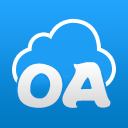
<style>
.page{position:relative;width:128px;height:128px}
.page>*{position:absolute;margin:0}
.t1{font:58.8px "Jpangtouyu";letter-spacing:-0.03em;color:#e8e8e9;font-weight:bold}
</style>
<div class="page">
<p class="t1" style="left:17px;top:62px;width:94px;height:46px">OA</p>
</div>
